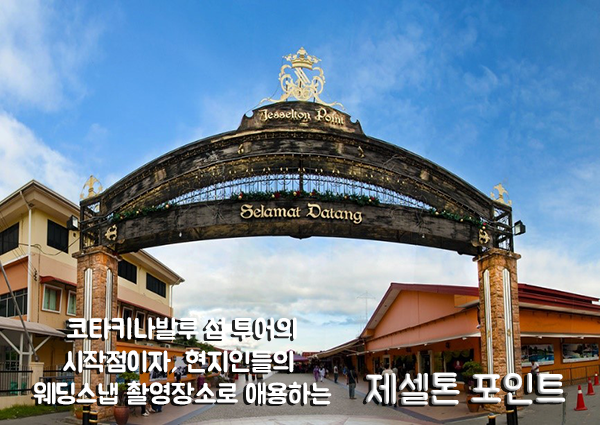
<style>
.page{position:relative;width:600px;height:425px}
.page>*{position:absolute;margin:0}
.t1{font:27px "BMJUA";color:#ffffff}
.t2{font:39.3px "BMJUA"}
</style>
<div class="page">
<p class="t1" style="left:33px;top:317px;width:299px;height:88px;text-align:center">코타키나발루 섬 투어의<br>시작점이자, 현지인들의 <br>웨딩스냅 촬영장소로 애용하는</p>
<p class="t2" style="left:365px;top:372px;width:201px;height:33px">제셀톤 포인트</p>
</div>
